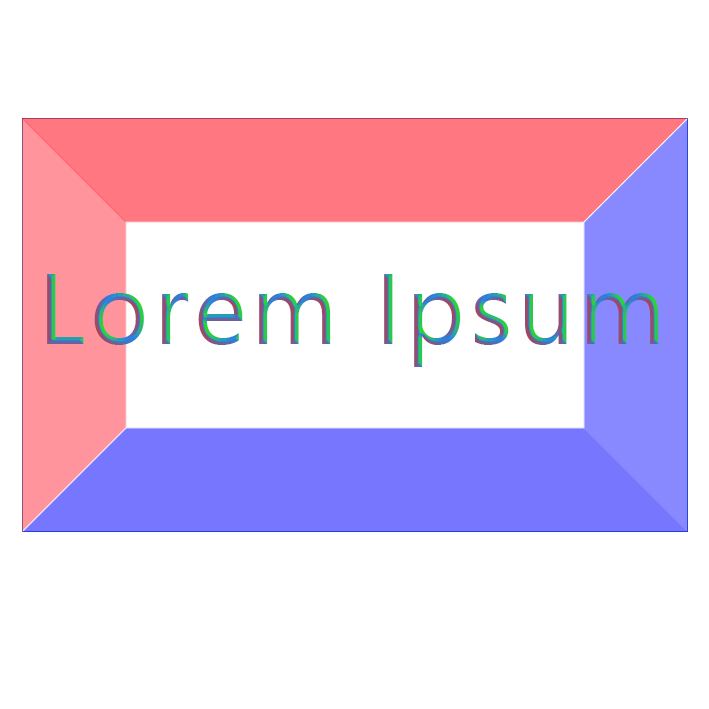
<style>
.page{position:relative;width:709px;height:709px;background:#ffffff}
.page>*{position:absolute;margin:0}
.t1{font:100px "SegoeUIHistoric";letter-spacing:0.05em}
</style>
<div class="page">
<p class="t1" style="left:47px;top:274px;width:612px;height:93px">Lorem Ipsum</p>
</div>
